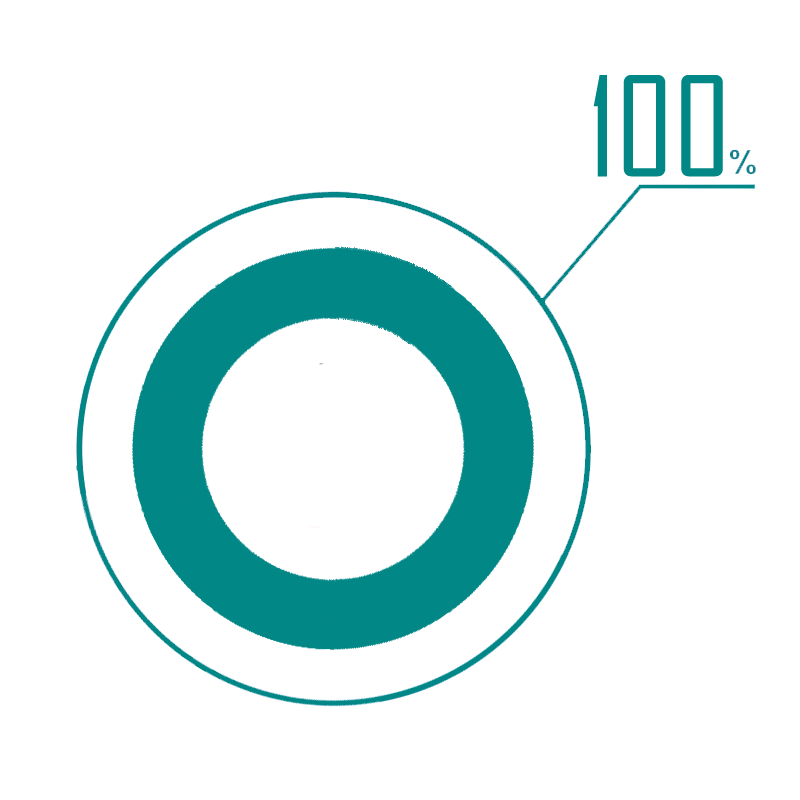
<style>
.page{position:relative;width:800px;height:800px;background:#ffffff}
.page>*{position:absolute;margin:0}
.t1{font:132.6px "AgencyFB-Reg";color:#018786}
</style>
<div class="page">
<p class="t1" style="left:593px;top:75px;width:130px;height:102px">100</p>
</div>
